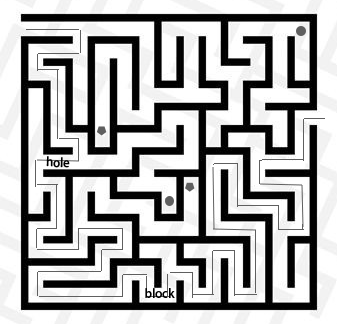
<style>
.page{position:relative;width:337px;height:324px;background:#ffffff}
.page>*{position:absolute;margin:0}
.t1{font:12px "AdobeHeitiStd-Regular";color:#000000}
</style>
<div class="page">
<p class="t1" style="left:46px;top:156px;width:24px;height:12px">hole</p>
<p class="t1" style="left:145px;top:288px;width:30px;height:10px">block</p>
</div>
